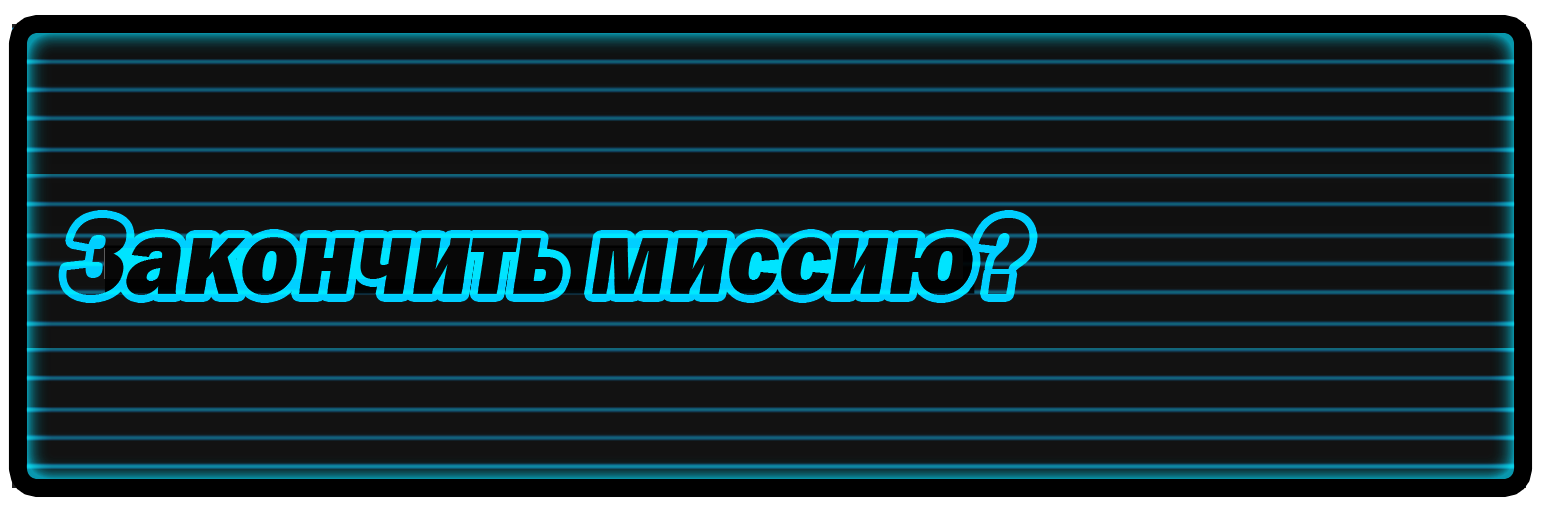
<style>
.page{position:relative;width:1544px;height:512px}
.page>*{position:absolute;margin:0}
.t1{font:112.7px "FranklinGothic-Heavy";color:#000000;font-style:italic;scale:0.87 1}
</style>
<div class="page">
<p class="t1" style="left:66px;top:218px;width:964px;height:77px">Закончить миссию?</p>
</div>
